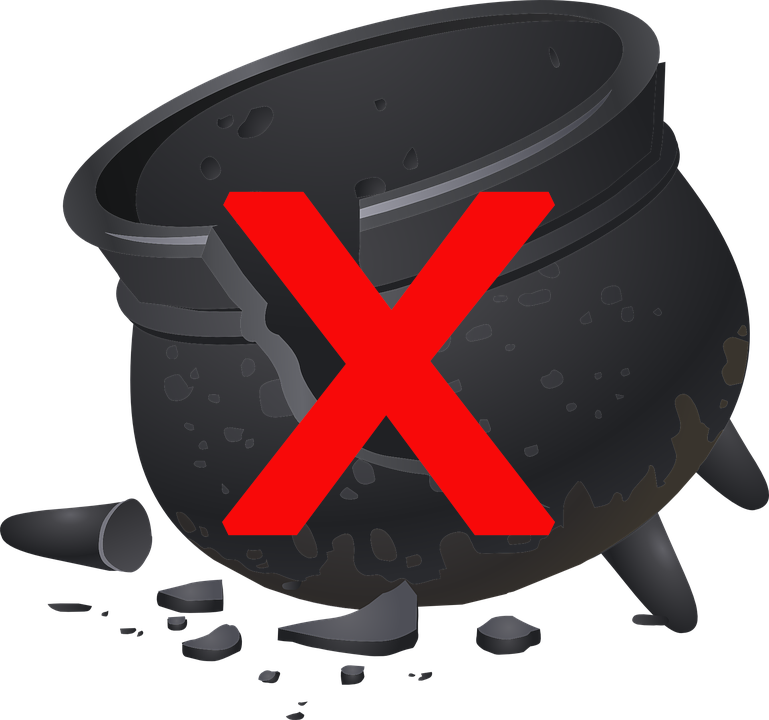
<style>
.page{position:relative;width:769px;height:720px;background:#ffffff}
.page>*{position:absolute;margin:0}
.t1{font:600px "Verdana";color:#f80909;font-weight:bold}
</style>
<div class="page">
<p class="t1" style="left:222px;top:191px;width:333px;height:345px">x</p>
</div>
